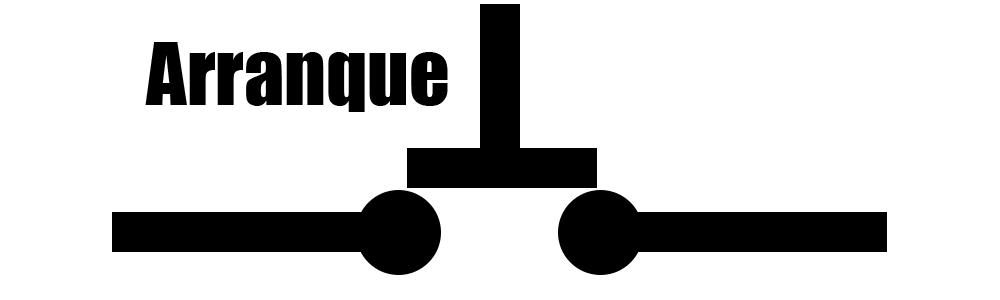
<style>
.page{position:relative;width:1000px;height:300px;background:#ffffff}
.page>*{position:absolute;margin:0}
.t1{font:80px "Impact";color:#000000}
</style>
<div class="page">
<p class="t1" style="left:145px;top:42px;width:303px;height:70px">Arranque</p>
</div>
